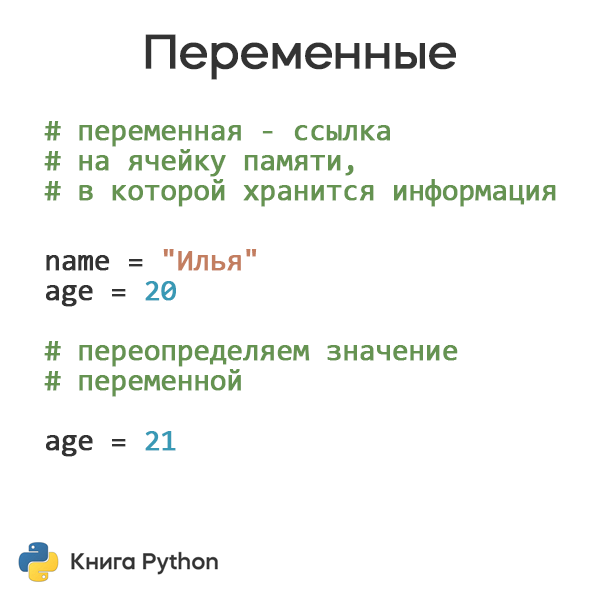
<style>
.page{position:relative;width:600px;height:600px;background:#ffffff}
.page>*{position:absolute;margin:0}
.t1{font:48px "MazzardH-Regular";letter-spacing:-0.025em;color:#333333;font-weight:bold}
.t2{font:30px/30px "Consolas";letter-spacing:-0.025em;color:#659351;font-weight:bold}
.t3{font:30px/30px "Consolas";letter-spacing:-0.025em;color:#333333;font-weight:bold}
.t4{font:30px/30px "Consolas";letter-spacing:-0.025em;color:#c37e60;font-weight:bold}
.t5{font:30px/30px "Consolas";letter-spacing:-0.025em;color:#3999b5;font-weight:bold}
</style>
<div class="page">
<p class="t1" style="left:145px;top:34px;width:311px;height:46px">Переменные</p>
<p class="t2" style="left:44px;top:121px;width:512px;height:336px"># переменная - ссылка<br># на ячейку памяти,<br># в которой хранится информация<br><br><br><span class="t3">name = </span><span class="t4">"Илья"<br></span><span class="t3">age = </span><span class="t5">20<br><br></span># переопределяем значение<br># переменной<br><br><span class="t3">age = </span><span class="t5">21</span></p>
</div>
